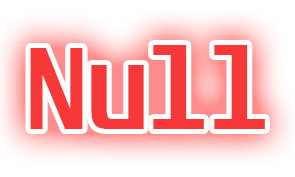
<style>
.page{position:relative;width:295px;height:177px;background:#ffffff}
.page>*{position:absolute;margin:0}
.t1{font:100px "Unispace-Bold";color:#f63838}
</style>
<div class="page">
<p class="t1" style="left:30px;top:45px;width:235px;height:84px">Null</p>
</div>
